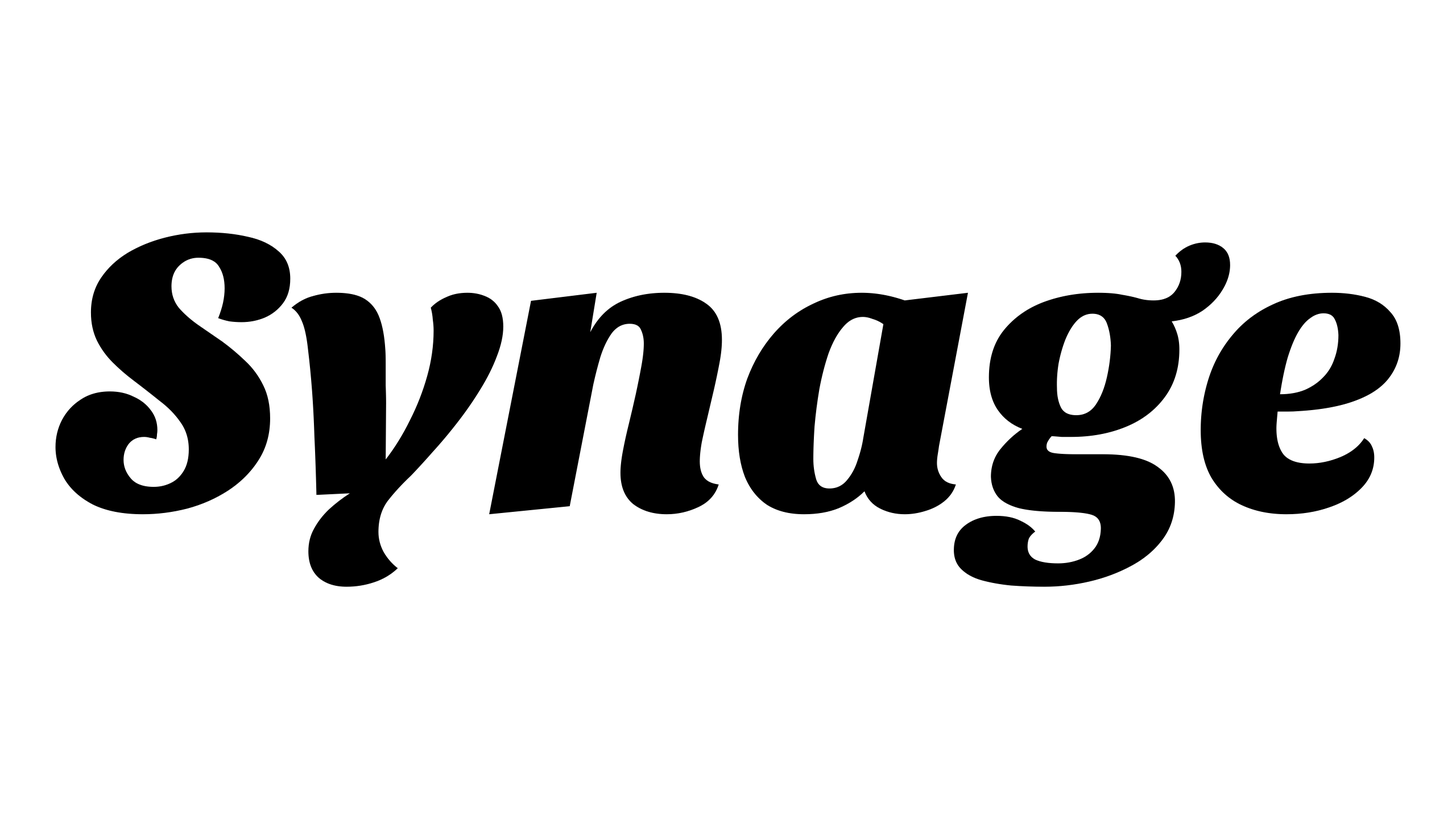
<style>
.page{position:relative;width:1456px;height:819px;background:#ffffff}
.page>*{position:absolute;margin:0}
.t1{font:402.7px "SansitaSwashed-ExtraBold";color:#000000}
</style>
<div class="page">
<p class="t1" style="left:55px;top:232px;width:1346px;height:355px">Synage</p>
</div>
